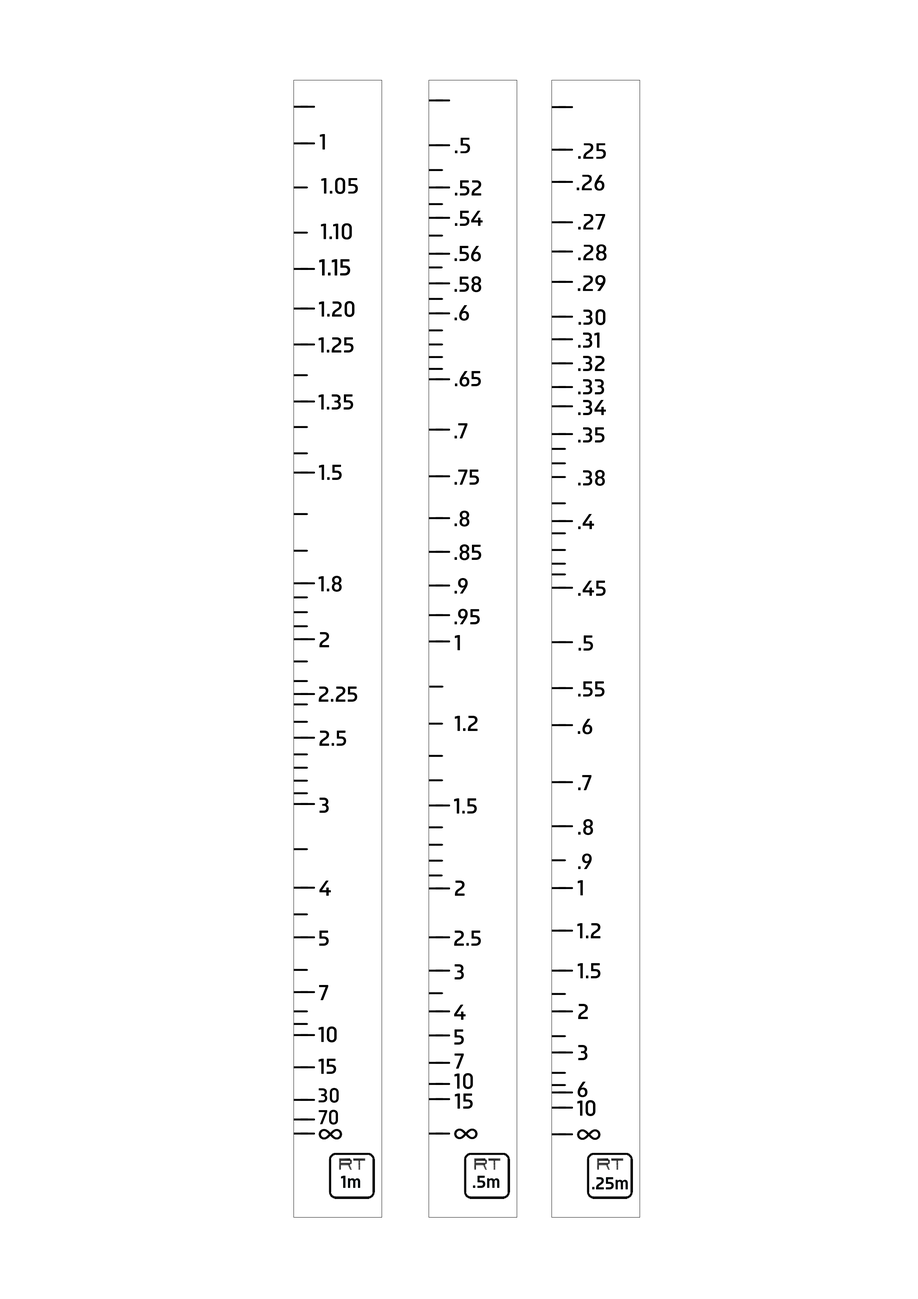
<style>
.page{position:relative;width:918px;height:1299px;background:#ffffff}
.page>*{position:absolute;margin:0}
.t1{font:23.1px "IsotonicTRIAL-Rg";color:#000000;font-weight:bold}
.t2{font:23.1px "IsotonicTRIAL-Md";color:#000000}
.t3{font:24.7px "IsotonicTRIAL-Md";color:#000000}
.t4{font:21.6px "IsotonicTRIAL-Md";color:#000000}
.t5{font:18.5px "IsotonicTRIAL-SmBd";color:#030a0b}
</style>
<div class="page">
<p class="t1" style="left:320px;top:134px;width:5px;height:16px">1</p>
<p class="t1" style="left:455px;top:138px;width:15px;height:15px">.5</p>
<p class="t1" style="left:578px;top:143px;width:28px;height:16px">.25</p>
<p class="t1" style="left:321px;top:178px;width:37px;height:16px">1.05</p>
<p class="t2" style="left:455px;top:180px;width:26px;height:15px">.52</p>
<p class="t1" style="left:577px;top:175px;width:28px;height:16px">.26</p>
<p class="t2" style="left:455px;top:211px;width:28px;height:15px">.54</p>
<p class="t1" style="left:578px;top:214px;width:27px;height:16px">.27</p>
<p class="t1" style="left:321px;top:223px;width:31px;height:17px">1.10</p>
<p class="t2" style="left:455px;top:246px;width:26px;height:15px">.56</p>
<p class="t1" style="left:578px;top:244px;width:29px;height:17px">.28</p>
<p class="t3" style="left:319px;top:259px;width:31px;height:16px">1.15</p>
<p class="t2" style="left:455px;top:276px;width:26px;height:16px">.58</p>
<p class="t1" style="left:578px;top:275px;width:28px;height:16px">.29</p>
<p class="t2" style="left:319px;top:301px;width:36px;height:16px">1.20</p>
<p class="t2" style="left:455px;top:305px;width:14px;height:16px">.6</p>
<p class="t2" style="left:579px;top:309px;width:27px;height:16px">.30</p>
<p class="t2" style="left:318px;top:337px;width:36px;height:15px">1.25</p>
<p class="t2" style="left:578px;top:332px;width:22px;height:16px">.31</p>
<p class="t2" style="left:578px;top:356px;width:27px;height:15px">.32</p>
<p class="t2" style="left:455px;top:371px;width:26px;height:16px">.65</p>
<p class="t2" style="left:578px;top:379px;width:26px;height:15px">.33t</p>
<p class="t2" style="left:318px;top:394px;width:35px;height:15px">1.35</p>
<p class="t2" style="left:578px;top:400px;width:28px;height:15px">.34</p>
<p class="t2" style="left:455px;top:423px;width:13px;height:15px">.7</p>
<p class="t2" style="left:578px;top:427px;width:27px;height:15px">.35</p>
<p class="t2" style="left:319px;top:465px;width:23px;height:15px">1.5</p>
<p class="t2" style="left:455px;top:469px;width:24px;height:16px">.75</p>
<p class="t2" style="left:578px;top:470px;width:27px;height:16px">.38</p>
<p class="t2" style="left:455px;top:511px;width:14px;height:15px">.8</p>
<p class="t2" style="left:578px;top:514px;width:16px;height:15px">.4</p>
<p class="t2" style="left:455px;top:544px;width:26px;height:16px">.85</p>
<p class="t2" style="left:318px;top:576px;width:24px;height:16px">1.8</p>
<p class="t2" style="left:455px;top:578px;width:13px;height:15px">.9</p>
<p class="t2" style="left:578px;top:581px;width:28px;height:15px">.45</p>
<p class="t2" style="left:455px;top:609px;width:25px;height:15px">.95</p>
<p class="t2" style="left:320px;top:632px;width:9px;height:15px">2</p>
<p class="t2" style="left:455px;top:635px;width:5px;height:15px">1</p>
<p class="t2" style="left:579px;top:635px;width:14px;height:15px">.5</p>
<p class="t2" style="left:319px;top:686px;width:38px;height:16px">2.25</p>
<p class="t2" style="left:578px;top:681px;width:27px;height:15px">.55</p>
<p class="t2" style="left:455px;top:716px;width:23px;height:15px">1.20</p>
<p class="t2" style="left:578px;top:719px;width:14px;height:15px">.6</p>
<p class="t2" style="left:320px;top:730px;width:26px;height:16px">2.5</p>
<p class="t2" style="left:578px;top:775px;width:14px;height:15px">.7</p>
<p class="t2" style="left:320px;top:797px;width:9px;height:16px">3</p>
<p class="t2" style="left:454px;top:798px;width:23px;height:15px">1.5</p>
<p class="t2" style="left:578px;top:819px;width:15px;height:16px">.8</p>
<p class="t2" style="left:578px;top:853px;width:14px;height:16px">.9</p>
<p class="t2" style="left:320px;top:880px;width:11px;height:16px">4</p>
<p class="t2" style="left:455px;top:880px;width:10px;height:16px">2</p>
<p class="t2" style="left:578px;top:880px;width:5px;height:15px">1</p>
<p class="t2" style="left:577px;top:923px;width:23px;height:15px">1.2</p>
<p class="t2" style="left:319px;top:930px;width:10px;height:16px">5</p>
<p class="t2" style="left:454px;top:930px;width:27px;height:16px">2.5</p>
<p class="t2" style="left:455px;top:964px;width:9px;height:15px">3</p>
<p class="t2" style="left:578px;top:963px;width:22px;height:15px">1.5</p>
<p class="t2" style="left:319px;top:985px;width:9px;height:15px">7</p>
<p class="t2" style="left:454px;top:1004px;width:12px;height:16px">4</p>
<p class="t2" style="left:578px;top:1004px;width:10px;height:15px">2</p>
<p class="t2" style="left:318px;top:1026px;width:19px;height:16px">10</p>
<p class="t2" style="left:454px;top:1029px;width:10px;height:15px">5</p>
<p class="t2" style="left:578px;top:1045px;width:10px;height:15px">3</p>
<p class="t2" style="left:318px;top:1058px;width:18px;height:16px">15</p>
<p class="t2" style="left:455px;top:1053px;width:9px;height:15px">7</p>
<p class="t2" style="left:454px;top:1073px;width:19px;height:16px">10</p>
<p class="t2" style="left:578px;top:1081px;width:10px;height:16px">6</p>
<p class="t4" style="left:318px;top:1088px;width:21px;height:15px">30</p>
<p class="t2" style="left:455px;top:1093px;width:18px;height:15px">15</p>
<p class="t4" style="left:319px;top:1110px;width:19px;height:14px">70</p>
<p class="t2" style="left:577px;top:1100px;width:19px;height:16px">10</p>
<p class="t5" style="left:341px;top:1175px;width:19px;height:13px">1m</p>
<p class="t5" style="left:473px;top:1175px;width:26px;height:13px">.5m</p>
<p class="t5" style="left:592px;top:1177px;width:36px;height:12px">.25m</p>
</div>
